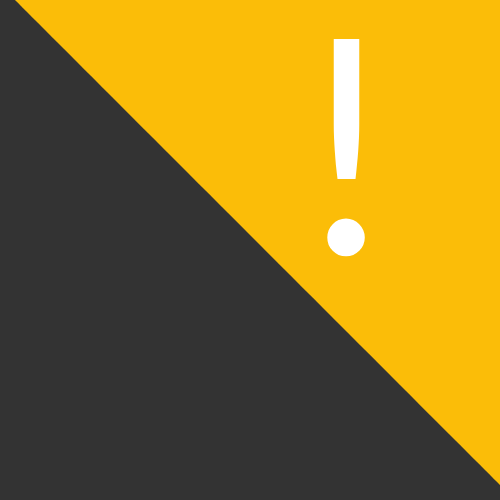
<style>
.page{position:relative;width:500px;height:500px;background:#333333}
.page>*{position:absolute;margin:0}
.t1{font:300px "Lato-Regular";color:#ffffff}
</style>
<div class="page">
<p class="t1" style="left:327px;top:39px;width:38px;height:218px">!</p>
</div>
